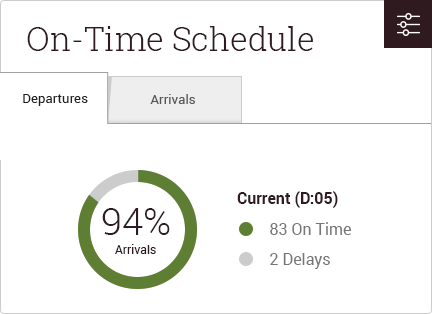
<style>
.page{position:relative;width:432px;height:314px;background:#ffffff}
.page>*{position:absolute;margin:0}
.t1{font:33px "RobotoSlab-Light";color:#2f1b1f}
.t2{font:13px "Roboto-Regular";color:#222222}
.t3{font:13px "Roboto-Regular";color:#555555}
.t4{font:16px "Roboto-Bold";color:#2f1b1f}
.t5{font:37.9px "Roboto-Light";color:#2f1b1f}
.t6{font:16px "Roboto-Regular";color:#767676}
.t7{font:12.1px "Roboto-Regular";color:#2f1b1f}
</style>
<div class="page">
<p class="t1" style="left:27px;top:26px;width:286px;height:25px">On-Time Schedule</p>
<p class="t2" style="left:23px;top:94px;width:65px;height:12px">Departures</p>
<p class="t3" style="left:150px;top:94px;width:45px;height:10px">Arrivals</p>
<p class="t4" style="left:237px;top:191px;width:101px;height:17px">Current (D:05)</p>
<p class="t5" style="left:102px;top:208px;width:68px;height:27px">94%</p>
<p class="t6" style="left:270px;top:222px;width:81px;height:13px">83 On Time</p>
<p class="t7" style="left:115px;top:244px;width:41px;height:10px">Arrivals</p>
<p class="t6" style="left:270px;top:253px;width:60px;height:16px">2 Delays</p>
</div>
